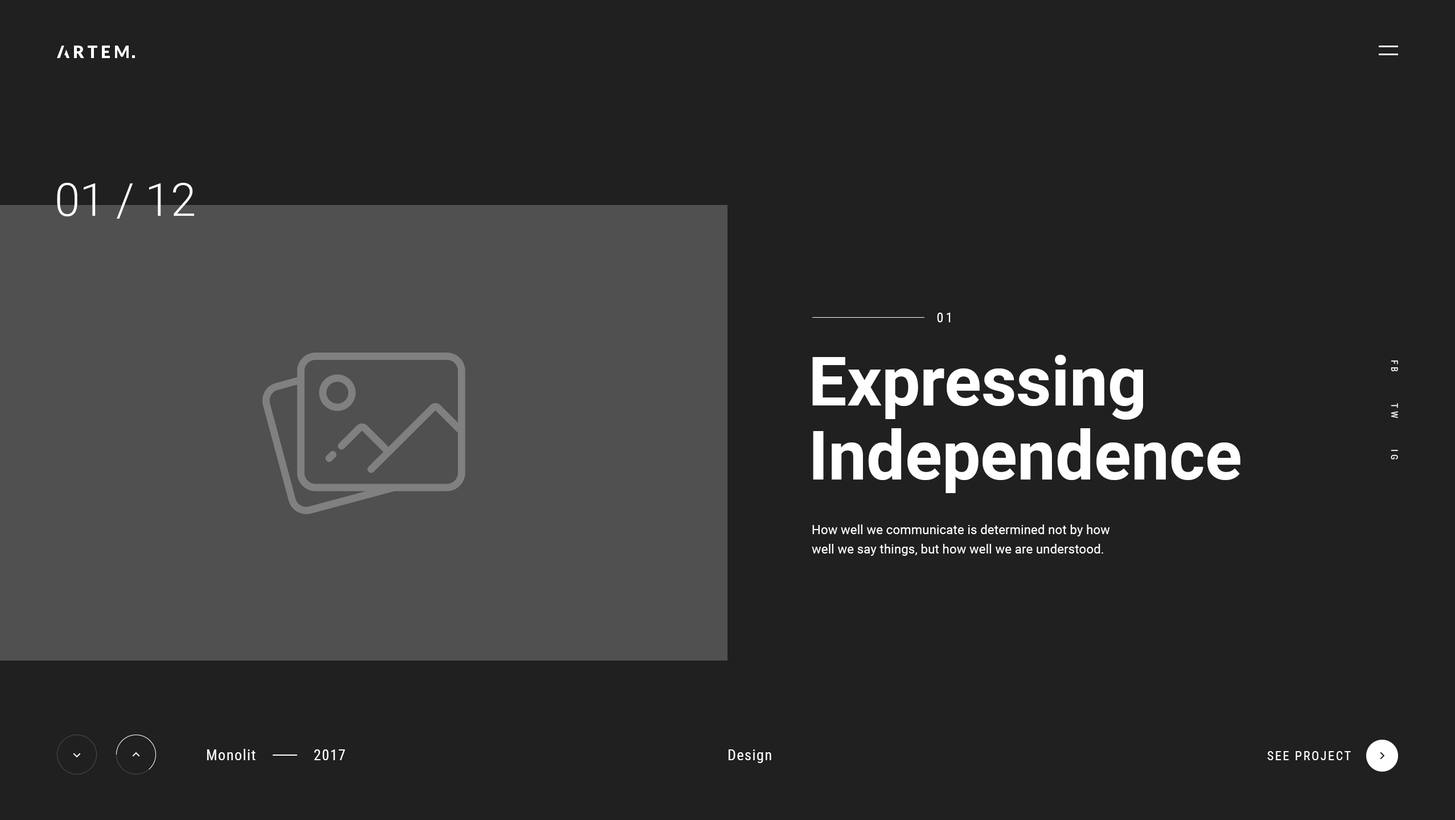
<style>
.page{position:relative;width:1455px;height:820px;background:#202020}
.page>*{position:absolute;margin:0}
.t1{font:45.5px "Roboto-Light";color:#ffffff}
.t2{font:13.7px "RobotoCondensed-Regular";letter-spacing:0.18em;color:#ffffff;text-transform:uppercase}
.t3{font:68.3px/74px "Roboto-Bold";color:#ffffff}
.t4{font:9.1px "RobotoCondensed-Regular";letter-spacing:0.3em;color:#ffffff;text-transform:uppercase}
.t5{font:12.5px/19.4px "Roboto-Regular";letter-spacing:0.01em;color:#ffffff}
.t6{font:14.8px "RobotoCondensed-Regular";letter-spacing:0.06em;color:#ffffff}
.t7{font:12.5px "RobotoCondensed-Regular";letter-spacing:0.12em;color:#ffffff;text-transform:uppercase}
</style>
<div class="page">
<p class="t1" style="left:57px;top:183px;width:137px;height:36px">01 / 12</p>
<p class="t2" style="left:937px;top:312px;width:14px;height:10px">01</p>
<p class="t3" style="left:812px;top:355px;width:428px;height:138px">Expressing<br>Independence</p>
<p class="t4" style="left:1391px;top:360px;width:7px;height:99px;rotate:90deg">Fb      Tw      Ig</p>
<p class="t5" style="left:812px;top:524px;width:298px;height:32px">How well we communicate is determined not by how well we say things, but how well we are understood.</p>
<p class="t6" style="left:207px;top:748px;width:49px;height:12px">Monolit</p>
<p class="t6" style="left:314px;top:749px;width:31px;height:11px">2017</p>
<p class="t6" style="left:728px;top:749px;width:43px;height:14px">Design</p>
<p class="t7" style="left:1267px;top:751px;width:84px;height:9px">See project</p>
</div>
